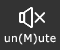
<style>
.page{position:relative;width:60px;height:50px;background:#333333}
.page>*{position:absolute;margin:0}
.t1{font:10.7px "Meiryo";letter-spacing:0.05em;color:#ffffff}
</style>
<div class="page">
<p class="t1" style="left:4px;top:33px;width:52px;height:12px">un(M)ute</p>
</div>
